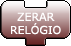
<style>
.page{position:relative;width:71px;height:46px;background:#ffffff}
.page>*{position:absolute;margin:0}
.t1{font:11px "Verdana";color:#ffffff}
</style>
<div class="page">
<p class="t1" style="left:11px;top:12px;width:50px;height:23px;text-align:center">ZERAR<br>RELÓGIO</p>
</div>
